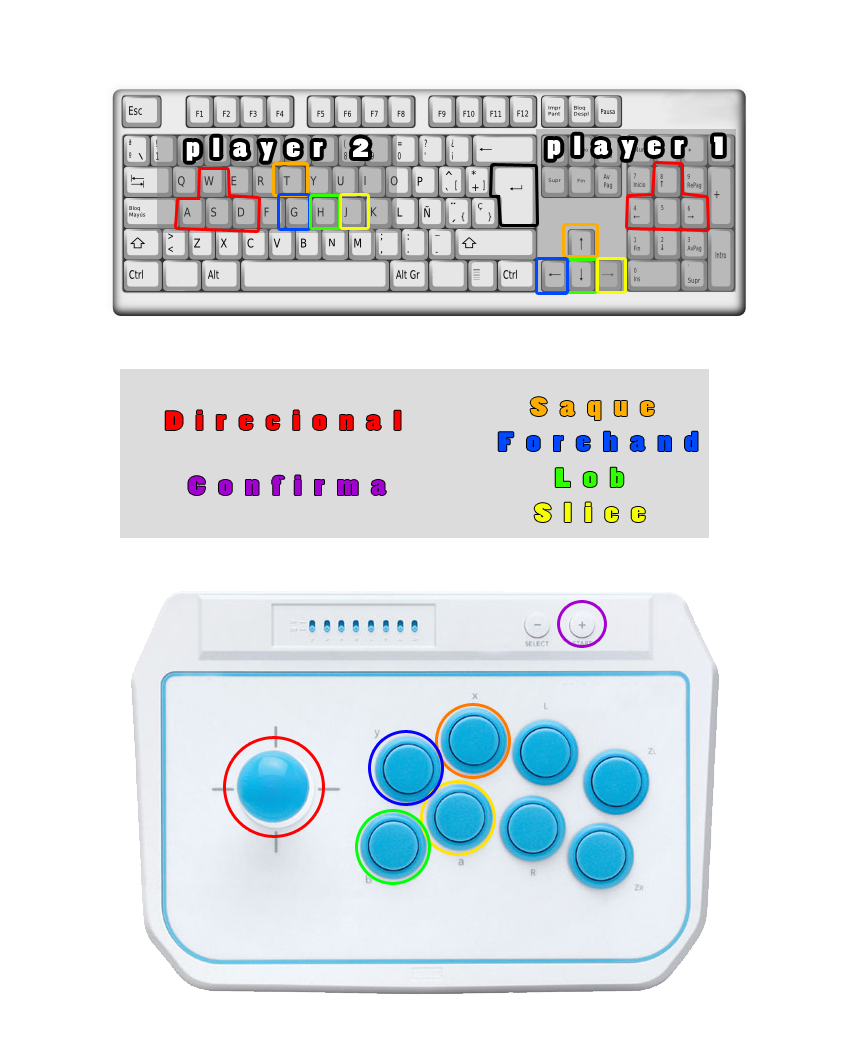
<style>
.page{position:relative;width:850px;height:1063px;background:#ffffff}
.page>*{position:absolute;margin:0}
.t1{font:25px "PoplarStd";letter-spacing:0.34em;color:#ffffff;scale:1.5 1}
.t2{font:25px "PoplarStd";letter-spacing:0.34em;color:#ffae00;scale:1.5 1}
.t3{font:25px "PoplarStd";letter-spacing:0.34em;color:#ff0000;scale:1.5 1}
.t4{font:25px "PoplarStd";letter-spacing:0.34em;color:#0048ff;scale:1.5 1}
.t5{font:25px "PoplarStd";letter-spacing:0.34em;color:#30ff00;scale:1.5 1}
.t6{font:25px "PoplarStd";letter-spacing:0.34em;color:#a300d2;scale:1.5 1}
.t7{font:25px "PoplarStd";letter-spacing:0.34em;color:#f6ff00;scale:1.5 1}
</style>
<div class="page">
<p class="t1" style="left:186px;top:137px;width:183px;height:24px">player 2</p>
<p class="t1" style="left:547px;top:135px;width:176px;height:24px">player 1</p>
<p class="t2" style="left:530px;top:397px;width:124px;height:23px">Saque</p>
<p class="t3" style="left:165px;top:410px;width:236px;height:20px">Direcional</p>
<p class="t4" style="left:498px;top:431px;width:200px;height:20px">Forehand</p>
<p class="t5" style="left:555px;top:467px;width:69px;height:20px">Lob</p>
<p class="t6" style="left:188px;top:475px;width:97px;height:20px">Conf</p>
<p class="t6" style="left:294px;top:475px;width:92px;height:20px">irma</p>
<p class="t7" style="left:534px;top:502px;width:111px;height:20px">Slice</p>
</div>
